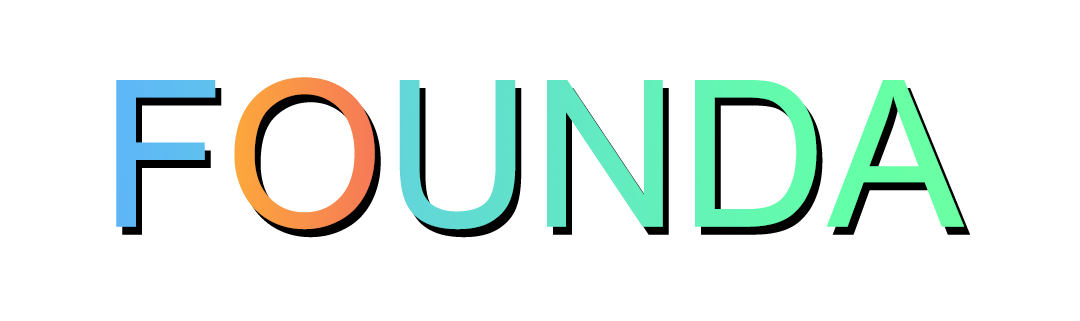
<style>
.page{position:relative;width:1080px;height:321px;background:#ffffff}
.page>*{position:absolute;margin:0}
.t1{font:204.6px "ArialMT"}
</style>
<div class="page">
<p class="t1" style="left:116px;top:77px;width:848px;height:153px">FOUNDA</p>
<p class="t1" style="left:122px;top:85px;width:848px;height:153px">FOUNDA</p>
</div>
